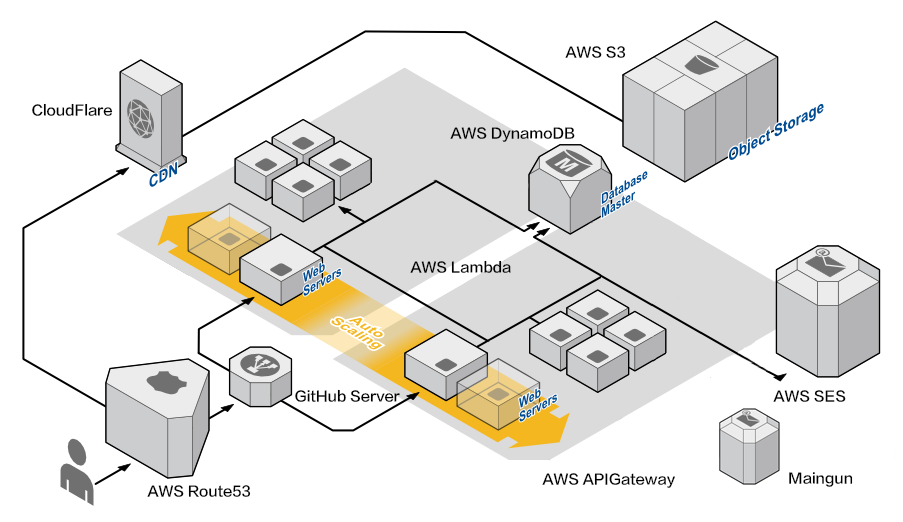
<style>
.page{position:relative;width:903px;height:522px;background:#ffffff}
.page>*{position:absolute;margin:0}
.t1{font:14px "FZLTZHB--B51-0";color:#000000}
</style>
<div class="page">
<p class="t1" style="left:565px;top:46px;width:61px;height:12px">AWS S3</p>
<p class="t1" style="left:32px;top:103px;width:81px;height:13px">CloudFlare</p>
<p class="t1" style="left:450px;top:127px;width:125px;height:15px">AWS DynamoDB</p>
<p class="t1" style="left:410px;top:260px;width:101px;height:13px">AWS Lambda</p>
<p class="t1" style="left:295px;top:389px;width:105px;height:13px">GitHub Server</p>
<p class="t1" style="left:773px;top:390px;width:73px;height:12px">AWS SES</p>
<p class="t1" style="left:542px;top:473px;width:133px;height:15px">AWS APIGateway</p>
<p class="t1" style="left:789px;top:472px;width:64px;height:15px">Maingun</p>
<p class="t1" style="left:147px;top:485px;width:104px;height:12px">AWS Route53</p>
</div>
